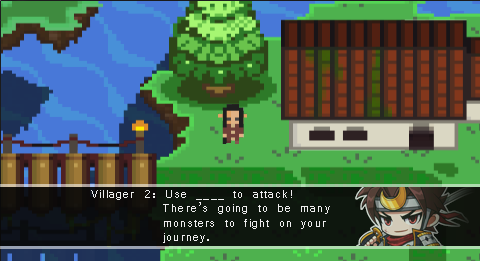
<style>
.page{position:relative;width:480px;height:261px}
.page>*{position:absolute;margin:0}
.t1{font:12px "Vrinda";letter-spacing:0.1em;color:#fefefe}
</style>
<div class="page">
<p class="t1" style="left:91px;top:190px;width:239px;height:53px;opacity:0.9">Villager 2: Use ____ to attack! <br>  There’s going to be many <br>  monsters to fight on your <br>  journey.</p>
</div>
